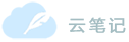
<style>
.page{position:relative;width:129px;height:42px;background:#ffffff}
.page>*{position:absolute;margin:0}
.t1{font:16.3px "MicrosoftYaHei";letter-spacing:0.2em;color:#a4bdc2;font-weight:bold}
</style>
<div class="page">
<p class="t1" style="left:68px;top:17px;width:58px;height:16px">云笔记</p>
</div>
